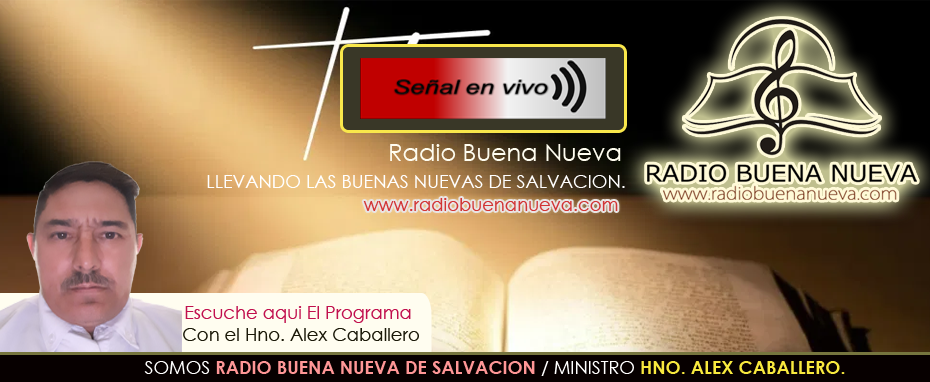
<style>
.page{position:relative;width:930px;height:382px}
.page>*{position:absolute;margin:0}
.t1{font:24px "CenturyGothic";color:#fffdf0}
.t2{font:18px "CenturyGothic";color:#ffffff}
.t3{font:18px "CenturyGothic";color:#d23535}
.t4{font:18px "CenturyGothic";color:#c1104e}
.t5{font:18px "CenturyGothic";color:#1b1909}
.t6{font:18px "CenturyGothic-Bold";color:#ff9696}
.t7{font:18px "CenturyGothic-Bold";color:#f8e93e}
</style>
<div class="page">
<p class="t1" style="left:390px;top:144px;width:231px;height:17px">Radio Buena Nueva</p>
<p class="t2" style="left:207px;top:175px;width:418px;height:13px">LLEVANDO LAS BUENAS NUEVAS DE SALVACION.</p>
<p class="t3" style="left:363px;top:198px;width:255px;height:13px">www.radiobuenanueva.com</p>
<p class="t4" style="left:185px;top:306px;width:226px;height:17px">Escuche aqui El Programa</p>
<p class="t5" style="left:183px;top:328px;width:236px;height:13px">Con el Hno. Alex Caballero</p>
<p class="t6" style="left:144px;top:361px;width:701px;height:15px"><span class="t2">SOMOS </span>RADIO BUENA NUEVA DE SALVACION <span class="t2">/ MINISTRO </span><span class="t7">HNO. ALEX CABALLERO.</span></p>
</div>
